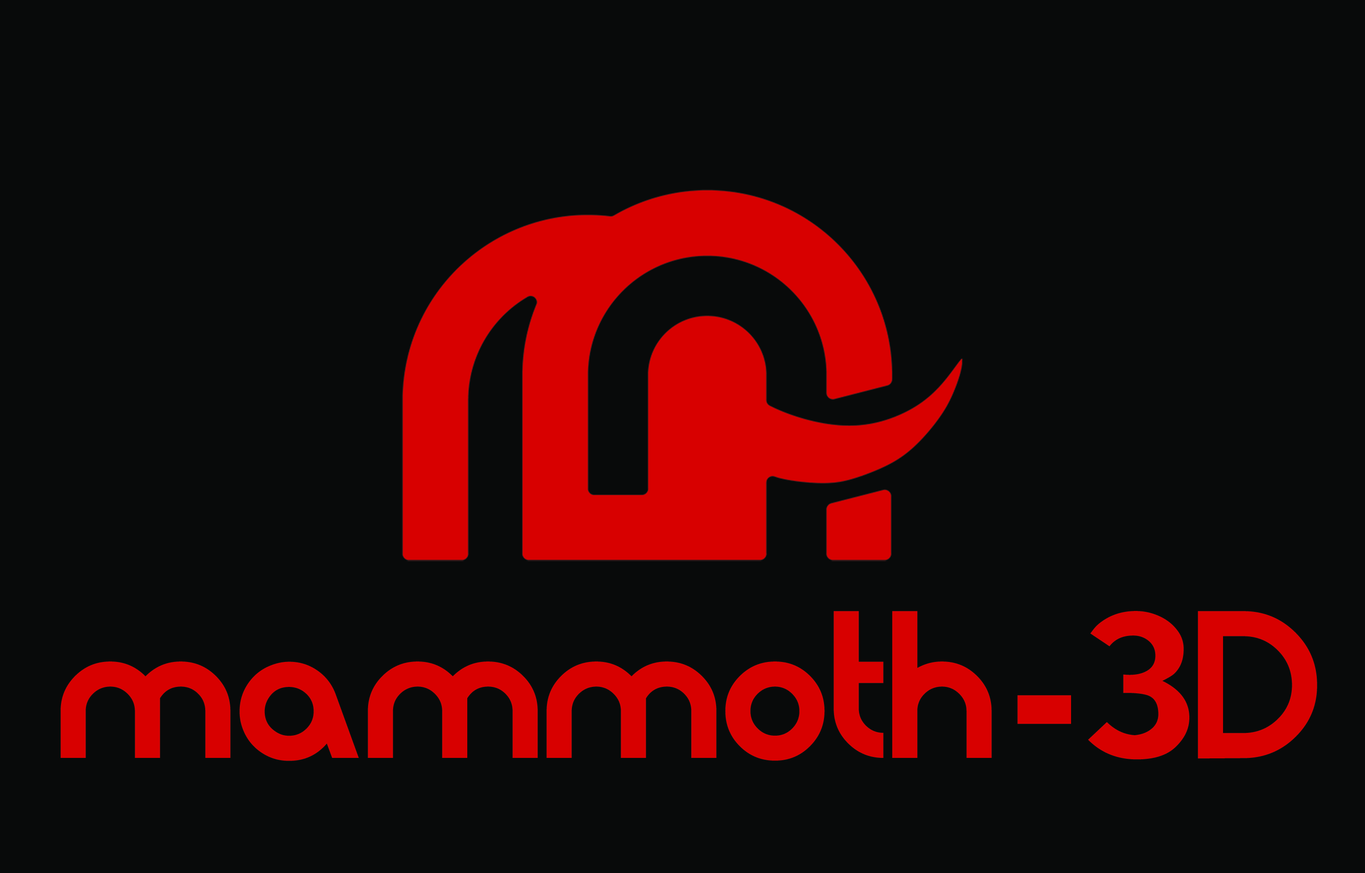
<style>
.page{position:relative;width:1365px;height:873px;background:#080a0a}
.page>*{position:absolute;margin:0}
.t1{font:185.3px "Moderna";letter-spacing:-0.02em;color:#d70000}
.t2{font:185.3px "Arial-Black";letter-spacing:-0.02em;color:#d70000}
</style>
<div class="page">
<p class="t1" style="left:61px;top:611px;width:1257px;height:150px">mammoth <span class="t2">- </span>3D</p>
</div>
